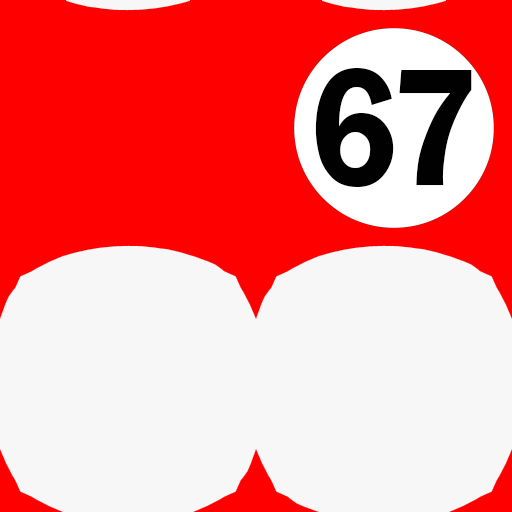
<style>
.page{position:relative;width:512px;height:512px;background:#f7f7f7}
.page>*{position:absolute;margin:0}
.t1{font:172.5px "FranklinGothic-Demi";letter-spacing:-0.05em;color:#010101;scale:0.87 1}
</style>
<div class="page">
<p class="t1" style="left:315px;top:68px;width:157px;height:119px">67</p>
</div>
